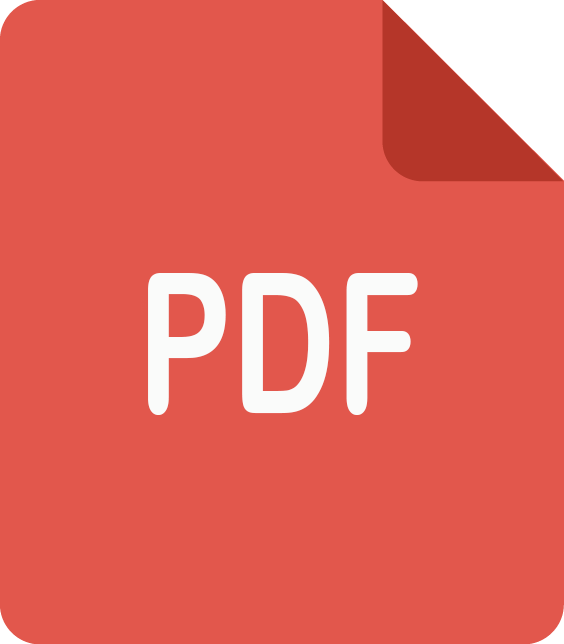
<style>
.page{position:relative;width:564px;height:644px;background:#e2574c}
.page>*{position:absolute;margin:0}
.t1{font:195.5px "ArialRoundedMTBold";color:#fafbfa;scale:0.72 1}
</style>
<div class="page">
<p class="t1" style="left:148px;top:273px;width:270px;height:142px">PDF</p>
</div>
